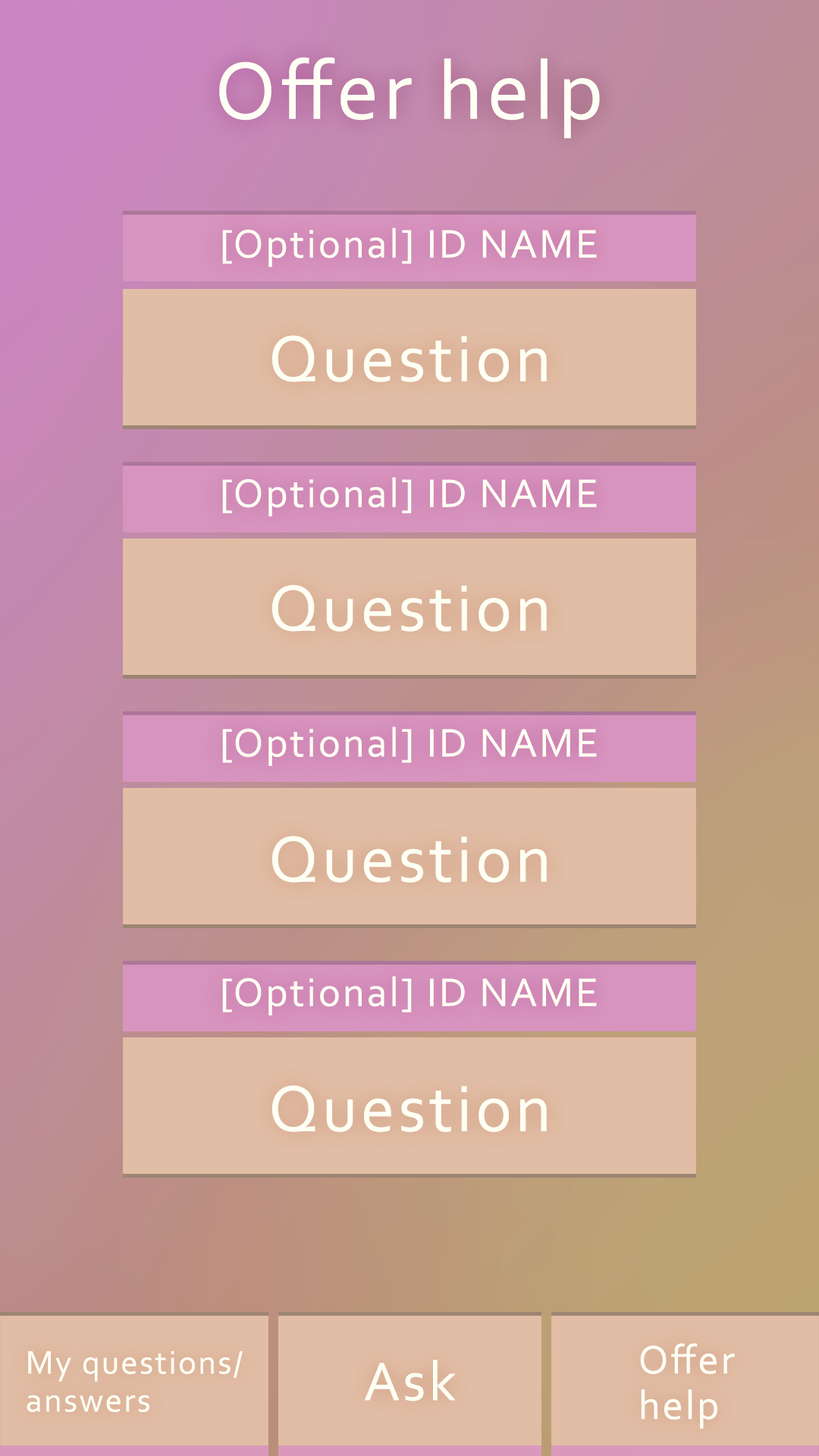
<style>
.page{position:relative;width:819px;height:1456px;background:#e1bda5}
.page>*{position:absolute;margin:0}
.t1{font:85.3px "Corbel";letter-spacing:0.05em;color:#fefff4}
.t2{font:41.7px "Corbel";letter-spacing:0.05em;color:#fefff4}
.t3{font:68.2px "Corbel";letter-spacing:0.05em;color:#fefff4}
.t4{font:41.7px/45.5px "Corbel";letter-spacing:0.05em;color:#fefff4}
.t5{font:34.1px/37.9px "Corbel";letter-spacing:0.05em;color:#fefff4}
.t6{font:56.9px "Corbel";letter-spacing:0.05em;color:#fefff4}
</style>
<div class="page">
<p class="t1" style="left:219px;top:57px;width:381px;height:82px">Offer help</p>
<p class="t2" style="left:222px;top:227px;width:375px;height:40px">[Optional] ID NAME</p>
<p class="t3" style="left:272px;top:335px;width:275px;height:47px">Question</p>
<p class="t2" style="left:222px;top:477px;width:375px;height:39px">[Optional] ID NAME</p>
<p class="t3" style="left:272px;top:585px;width:275px;height:47px">Question</p>
<p class="t2" style="left:222px;top:726px;width:375px;height:40px">[Optional] ID NAME</p>
<p class="t3" style="left:272px;top:836px;width:275px;height:47px">Question</p>
<p class="t2" style="left:222px;top:976px;width:375px;height:39px">[Optional] ID NAME</p>
<p class="t3" style="left:272px;top:1085px;width:275px;height:47px">Question</p>
<p class="t4" style="left:640px;top:1343px;width:95px;height:86px">Offer<br>help</p>
<p class="t5" style="left:27px;top:1351px;width:216px;height:61px">My questions/<br>answers</p>
<p class="t6" style="left:365px;top:1360px;width:91px;height:41px">Ask</p>
</div>
